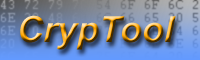
<style>
.page{position:relative;width:200px;height:60px}
.page>*{position:absolute;margin:0}
.t1{font:36px "Arial-BoldItalicMT"}
</style>
<div class="page">
<p class="t1" style="left:20px;top:15px;width:156px;height:35px">CrypTool</p>
</div>
